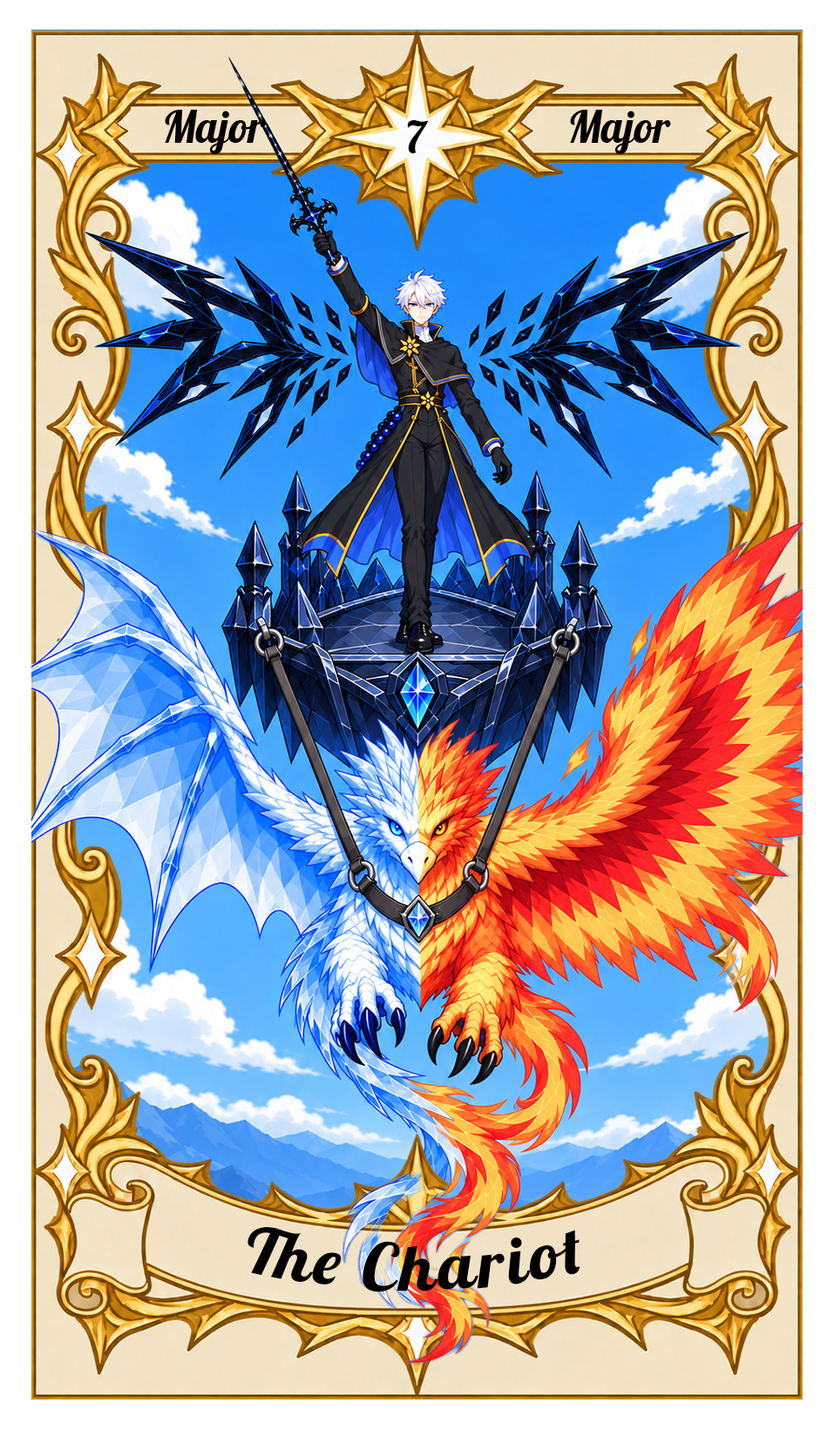
<style>
.page{position:relative;width:834px;height:1430px}
.page>*{position:absolute;margin:0}
.t1{font:43.6px "Lobster-Regular";color:#000000}
.t2{font:65.3px "Lobster-Regular";letter-spacing:0.05em;color:#000000}
</style>
<div class="page">
<p class="t1" style="left:165px;top:110px;width:101px;height:44px">Major</p>
<p class="t1" style="left:570px;top:110px;width:101px;height:44px">Major</p>
<p class="t1" style="left:407px;top:120px;width:21px;height:33px">7</p>
<p class="t2" style="left:247px;top:1227px;width:333px;height:66px">The Chariot</p>
</div>
